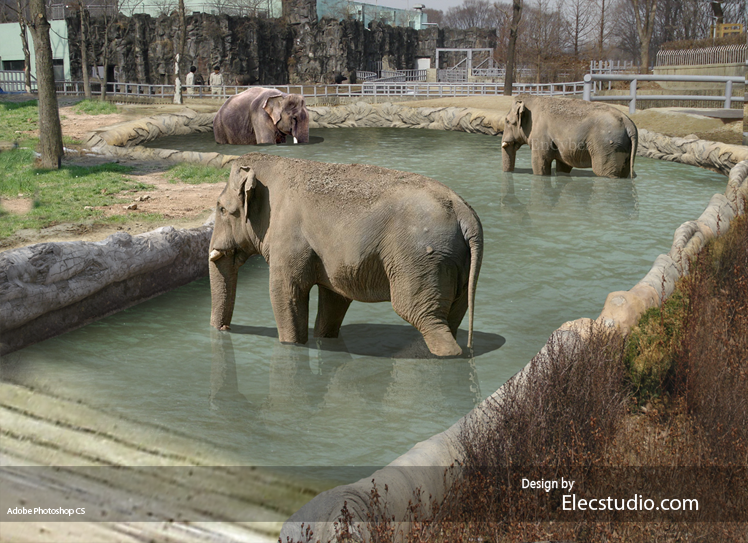
<style>
.page{position:relative;width:748px;height:543px}
.page>*{position:absolute;margin:0}
.t1{font:14.6px "Myriad-CnWeb";color:#ffffff}
.t2{font:21.9px "MyriadPro-Regular";color:#ffffff}
.t3{font:8.8px "MyriadPro-Regular";color:#ffffff}
</style>
<div class="page">
<p class="t1" style="left:522px;top:477px;width:53px;height:15px">Design by</p>
<p class="t2" style="left:562px;top:494px;width:137px;height:16px">Elecstudio.com</p>
<p class="t3" style="left:7px;top:507px;width:78px;height:9px">Adobe Photoshop CS</p>
</div>
